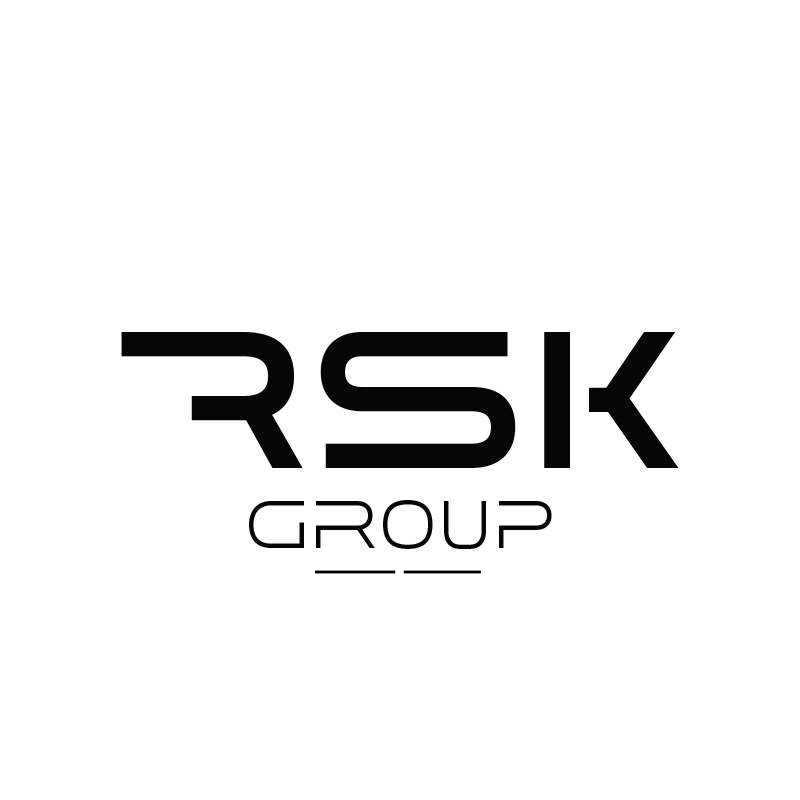
<style>
.page{position:relative;width:800px;height:800px;background:#ffffff}
.page>*{position:absolute;margin:0}
.t1{font:194.4px "MADEFutureXHEADER-Medium";color:#070606}
.t2{font:66.7px "MADEFutureXHEADER-Light";color:#070606}
</style>
<div class="page">
<p class="t1" style="left:121px;top:332px;width:558px;height:136px">RSK</p>
<p class="t2" style="left:249px;top:500px;width:303px;height:49px">GrOup</p>
</div>
